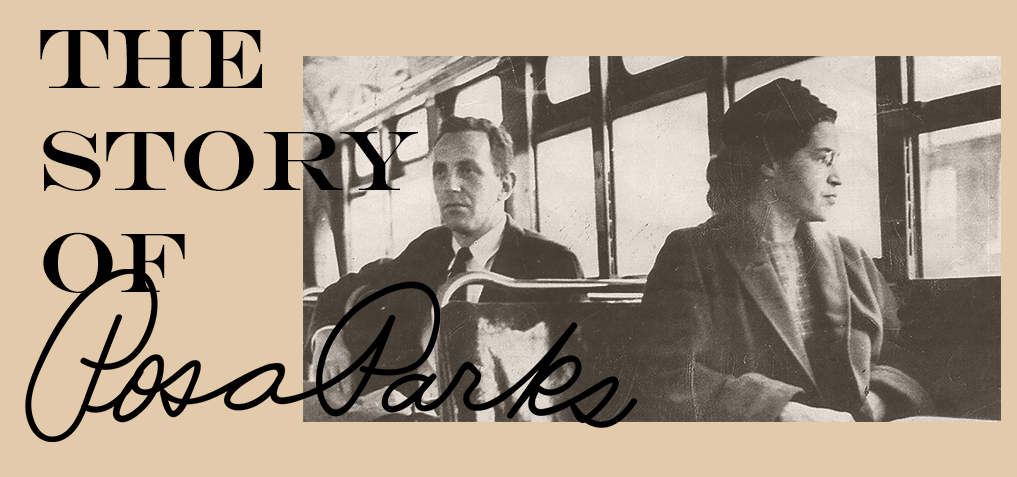
<style>
.page{position:relative;width:1017px;height:477px;background:#e3caaa}
.page>*{position:absolute;margin:0}
.t1{font:85px "EngraversMT";color:#000000}
</style>
<div class="page">
<p class="t1" style="left:40px;top:30px;width:378px;height:263px">The story Of</p>
</div>
